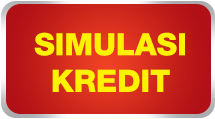
<style>
.page{position:relative;width:215px;height:119px}
.page>*{position:absolute;margin:0}
.t1{font:30.6px "HelveticaNeueLTStd-Hv";color:#fff200}
</style>
<div class="page">
<p class="t1" style="left:34px;top:32px;width:151px;height:60px;text-align:center">SIMULASI<br>KREDIT</p>
</div>
